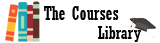
<style>
.page{position:relative;width:160px;height:43px;background:#ffffff}
.page>*{position:absolute;margin:0}
.t1{font:19.4px/18.1px "Rockwell-Condensed";color:#000000}
.t2{font:18.1px/18.1px "Rockwell-Condensed";color:#000000}
</style>
<div class="page">
<p class="t1" style="left:44px;top:6px;width:97px;height:36px">The Courses <br>         <span class="t2">Library</span></p>
</div>
